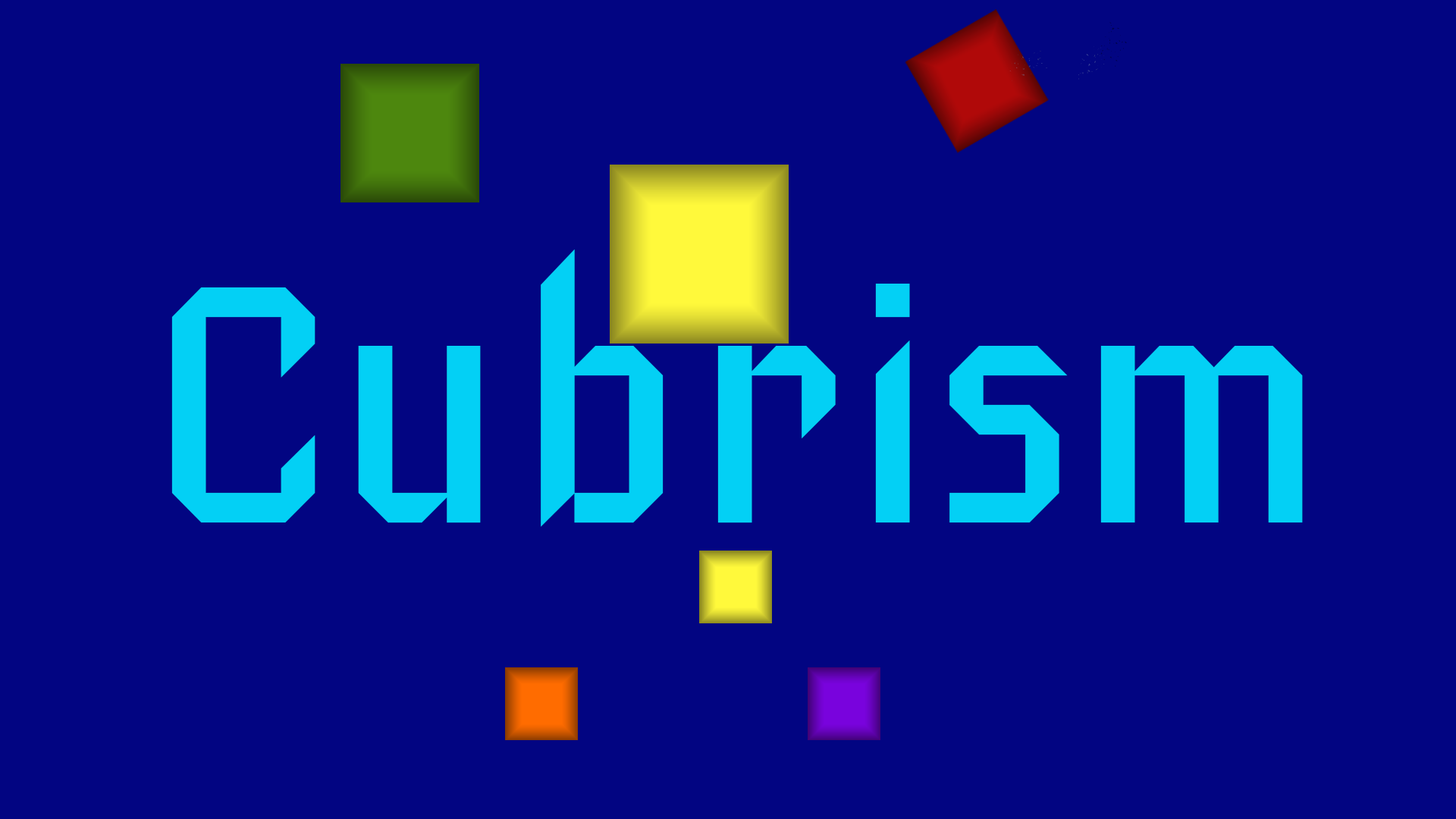
<style>
.page{position:relative;width:1456px;height:819px;background:#020582}
.page>*{position:absolute;margin:0}
.t1{font:339.9px "Iceberg-Regular";color:#03d0f5}
</style>
<div class="page">
<p class="t1" style="left:171px;top:249px;width:1132px;height:278px">Cubrism</p>
</div>
